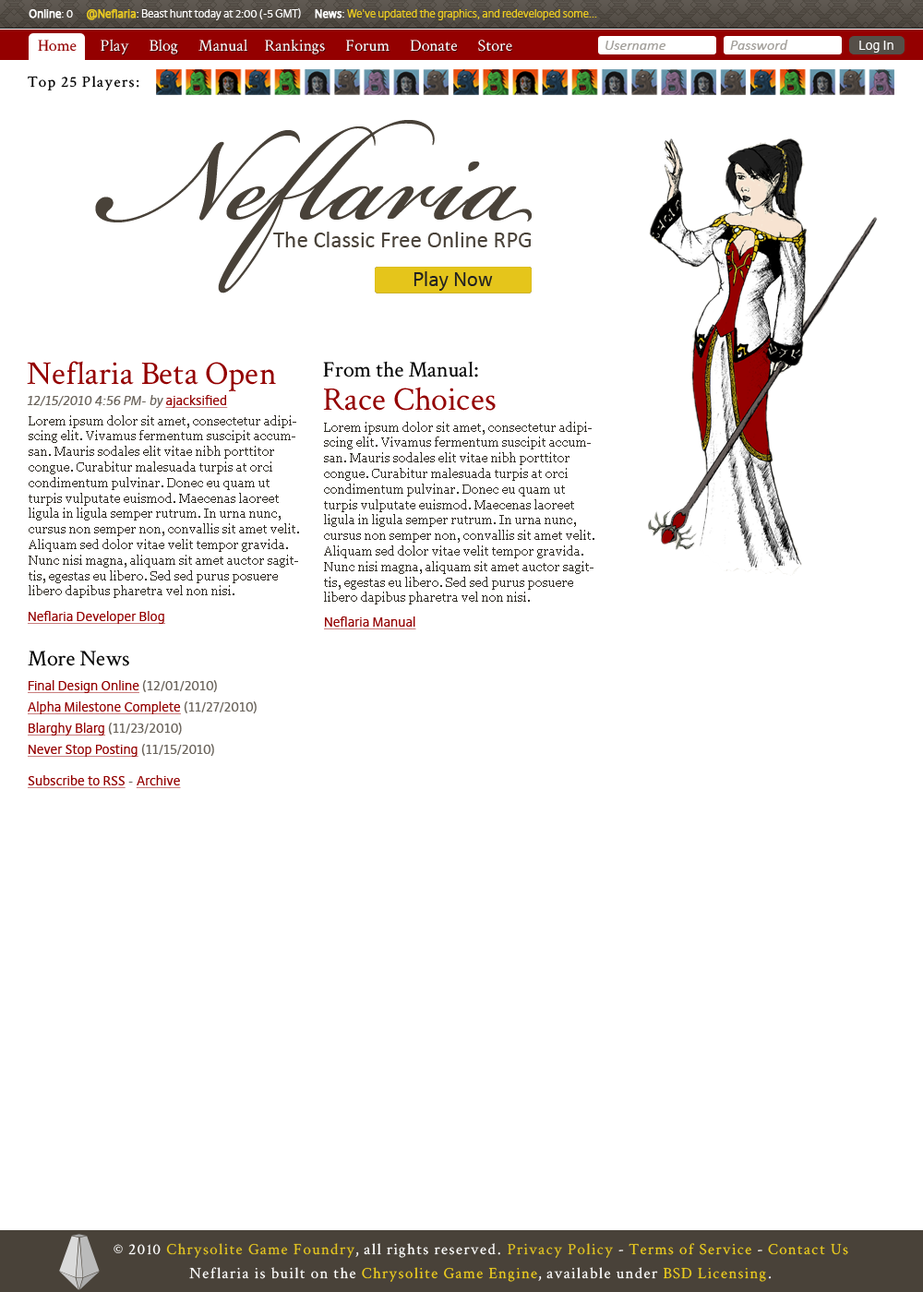
<style>
.page{position:relative;width:923px;height:1292px;background:#ffffff}
.page>*{position:absolute;margin:0}
.t1{font:11.1px "DejaWeb";letter-spacing:-0.03em;color:#ebcb21}
.t2{font:11.1px "DejaWeb";letter-spacing:-0.03em;color:#ffffff;font-weight:bold}
.t3{font:11.1px "DejaWeb";letter-spacing:-0.03em;color:#ffffff}
.t4{font:11.1px "DejaWeb";letter-spacing:-0.03em;color:#e8c821;font-weight:bold}
.t5{font:16.6px "crimson_text_roman";color:#ffffff}
.t6{font:16.6px "crimson_text_roman";color:#940000}
.t7{font:16.6px "crimson_text_roman"}
.t8{font:14.8px "Calibri-Italic";color:#a3a09b}
.t9{font:12.9px "DejaWeb";color:#ffffff}
.t10{font:15.7px "crimson_text_roman";letter-spacing:0.08em;color:#000000}
.t11{font:19.3px "DejaWeb";color:#212121}
.t12{font:33.2px "crimson_text_roman";color:#940000}
.t13{font:22.1px/22.1px "crimson_text_roman";color:#000000}
.t14{font:33.2px/33.2px "crimson_text_roman";color:#940000}
.t15{font:12.9px "DejaWeb-Italic";color:#69635b}
.t16{font:12.9px "DejaWeb";color:#940000;text-decoration:underline}
.t17{font:12.9px "Georgia";color:#302c25}
.t18{font:22.1px "crimson_text_roman";color:#000000}
.t19{font:12.9px "DejaWeb";color:#69635b}
.t20{font:15.7px/24px "crimson_text_roman";letter-spacing:0.08em;color:#ffffff}
.t21{font:15.7px/24px "crimson_text_roman";letter-spacing:0.08em;color:#e4c520}
.t22{font:15.7px/24px "crimson_text_roman";letter-spacing:0.08em;color:#eccc1e}
</style>
<div class="page">
<p class="t1" style="left:29px;top:8px;width:568px;height:12px"><span class="t2">Online</span><span class="t3">: 0      </span><span class="t4">@Neflaria</span><span class="t3">: Beast hunt today at 2:00 (-5 GMT)      </span><span class="t2">News</span><span class="t3">: </span>We've updated the graphics, and redeveloped some...</p>
<p class="t5" style="left:38px;top:39px;width:474px;height:15px"><span class="t6">Home</span>       Play      Blog      Manual     Rankings      Forum      Donate      Store</p>
<p class="t7" style="left:102px;top:40px;width:411px;height:15px">Play      Blog      Manual     Rankings      Forum      Donate      Store</p>
<p class="t8" style="left:605px;top:41px;width:61px;height:9px">Username</p>
<p class="t8" style="left:730px;top:40px;width:58px;height:10px">Password</p>
<p class="t9" style="left:859px;top:41px;width:34px;height:12px">Log In</p>
<p class="t10" style="left:28px;top:76px;width:111px;height:14px">Top 25 Players:</p>
<p class="t11" style="left:413px;top:271px;width:80px;height:20px">Play Now</p>
<p class="t12" style="left:27px;top:361px;width:249px;height:30px">Neflaria Beta Open</p>
<p class="t13" style="left:323px;top:361px;width:173px;height:50px">From the Manual:<br><span class="t14">Race Choices</span></p>
<p class="t15" style="left:27px;top:395px;width:201px;height:13px">12/15/2010 4:56 PM- by <span class="t16">ajacksified</span></p>
<p class="t17" style="left:29px;top:415px;width:270px;height:183px">Lorem ipsum dolor sit amet, consectetur adipiscing elit. Vivamus fermentum suscipit accumsan. Mauris sodales elit vitae nibh porttitor congue. Curabitur malesuada turpis at orci condimentum pulvinar. Donec eu quam ut turpis vulputate euismod. Maecenas laoreet ligula in ligula semper rutrum. In urna nunc, cursus non semper non, convallis sit amet velit. Aliquam sed dolor vitae velit tempor gravida. Nunc nisi magna, aliquam sit amet auctor sagittis, egestas eu libero. Sed sed purus posuere libero dapibus pharetra vel non nisi.</p>
<p class="t17" style="left:324px;top:422px;width:270px;height:182px">Lorem ipsum dolor sit amet, consectetur adipiscing elit. Vivamus fermentum suscipit accumsan. Mauris sodales elit vitae nibh porttitor congue. Curabitur malesuada turpis at orci condimentum pulvinar. Donec eu quam ut turpis vulputate euismod. Maecenas laoreet ligula in ligula semper rutrum. In urna nunc, cursus non semper non, convallis sit amet velit. Aliquam sed dolor vitae velit tempor gravida. Nunc nisi magna, aliquam sit amet auctor sagittis, egestas eu libero. Sed sed purus posuere libero dapibus pharetra vel non nisi.</p>
<p class="t16" style="left:28px;top:611px;width:137px;height:13px">Neflaria Developer Blog</p>
<p class="t16" style="left:324px;top:616px;width:92px;height:13px">Neflaria Manual</p>
<p class="t18" style="left:28px;top:651px;width:101px;height:15px">More News</p>
<p class="t16" style="left:28px;top:680px;width:189px;height:13px">Final Design Online<span class="t19"> (12/01/2010)</span></p>
<p class="t16" style="left:28px;top:701px;width:229px;height:13px">Alpha Milestone Complete<span class="t19"> (11/27/2010)</span></p>
<p class="t16" style="left:28px;top:723px;width:154px;height:13px">Blarghy Blarg<span class="t19"> (11/23/2010)</span></p>
<p class="t16" style="left:28px;top:744px;width:186px;height:13px">Never Stop Posting<span class="t19"> (11/15/2010)</span></p>
<p class="t16" style="left:28px;top:775px;width:153px;height:13px">Subscribe to RSS<span class="t19"> - </span>Archive</p>
<p class="t20" style="left:114px;top:1243px;width:734px;height:39px;text-align:center">© 2010 <span class="t21">Chrysolite Game Foundry</span>, all rights reserved. <span class="t21">Privacy Policy</span> - <span class="t22">Terms of Service</span> - <span class="t22">Contact Us<br></span>Neflaria is built on the <span class="t22">Chrysolite Game Engine</span>, available under <span class="t22">BSD Licensing</span>.</p>
</div>
